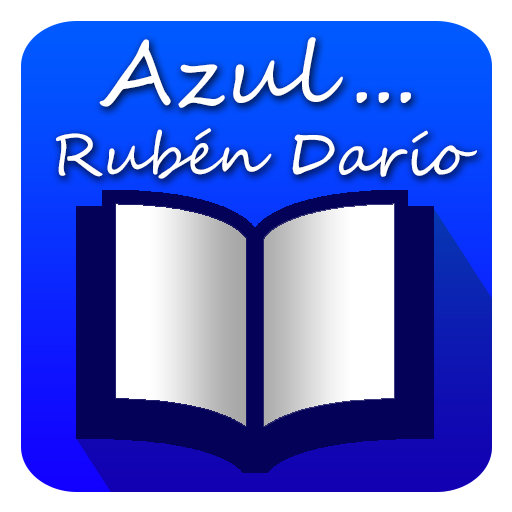
<style>
.page{position:relative;width:512px;height:512px;background:#ffffff}
.page>*{position:absolute;margin:0}
.t1{font:58.7px "SegoeScript";color:#ffffff}
.t2{font:87.8px "SegoeScript";color:#ffffff}
</style>
<div class="page">
<p class="t1" style="left:56px;top:37px;width:421px;height:142px;text-align:center"><span class="t2">Azul...<br></span>Rubén Darío</p>
</div>
